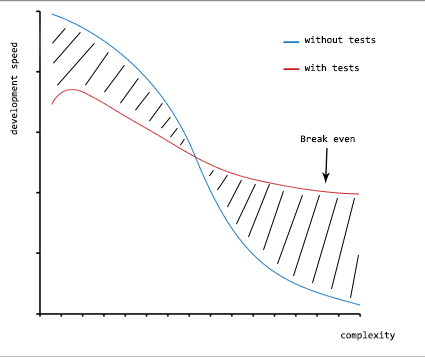
<style>
.page{position:relative;width:425px;height:357px;background:#ffffff}
.page>*{position:absolute;margin:0}
.t1{font:10px "Consolas";color:#000000}
.t2{font:9.8px "Consolas";color:#000000}
</style>
<div class="page">
<p class="t1" style="left:304px;top:36px;width:72px;height:8px">without tests</p>
<p class="t2" style="left:10px;top:42px;width:9px;height:93px;rotate:-90deg">development speed</p>
<p class="t1" style="left:304px;top:64px;width:55px;height:8px">with tests</p>
<p class="t1" style="left:301px;top:135px;width:54px;height:8px">Break even</p>
<p class="t1" style="left:341px;top:331px;width:54px;height:10px">complexity</p>
</div>
